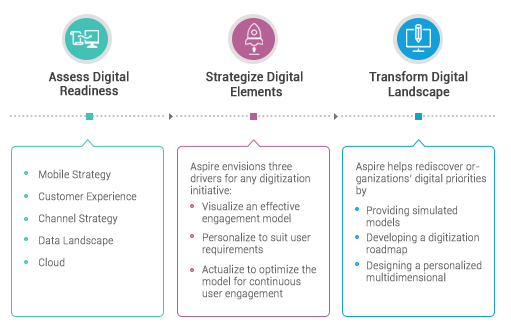
<style>
.page{position:relative;width:511px;height:332px;background:#ffffff}
.page>*{position:absolute;margin:0}
.t1{font:12.7px "Roboto-Regular";color:#424242;font-weight:bold;scale:0.94 1}
.t2{font:10.6px "Roboto-Light";color:#616161;font-weight:bold;scale:0.94 1}
</style>
<div class="page">
<p class="t1" style="left:48px;top:71px;width:81px;height:25px;text-align:center">Assess Digital<br> Readiness</p>
<p class="t1" style="left:206px;top:71px;width:97px;height:26px;text-align:center">Strategize Digital<br> Elements</p>
<p class="t1" style="left:369px;top:71px;width:99px;height:28px;text-align:center">Transform Digital<br>Landscape</p>
<p class="t2" style="left:190px;top:161px;width:120px;height:34px">Aspire envisions three drivers for any digitization initiative:</p>
<p class="t2" style="left:356px;top:161px;width:130px;height:36px">Aspire helps rediscover organizations’ digital priorities by</p>
<p class="t2" style="left:39px;top:169px;width:98px;height:98px">Mobile Strategy<br>Customer Experience<br>Channel Strategy<br>Data Landscape<br>Cloud</p>
<p class="t2" style="left:202px;top:201px;width:114px;height:99px">Visualize an effective engagement model<br>Personalize to suit user requirements<br>Actualize to optimize the model for continuous user engagement</p>
<p class="t2" style="left:366px;top:205px;width:116px;height:77px">Providing simulated models<br>Developing a digitization roadmap<br>Designing a personalized multidimensional framework</p>
</div>
